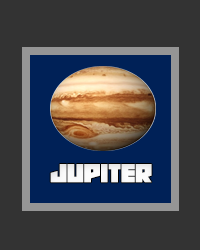
<style>
.page{position:relative;width:200px;height:250px;background:#333333}
.page>*{position:absolute;margin:0}
.t1{font:26.4px "RobotRadicals";color:#ffffff}
</style>
<div class="page">
<p class="t1" style="left:50px;top:164px;width:102px;height:19px">jupiter</p>
</div>
